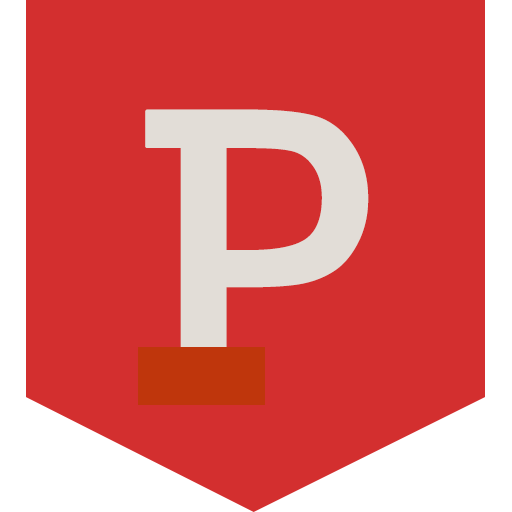
<style>
.page{position:relative;width:512px;height:512px;background:#d32f2f}
.page>*{position:absolute;margin:0}
.t1{font:416.7px "Rockwell";letter-spacing:-0.04em;color:#e2ddd7;font-weight:bold}
</style>
<div class="page">
<p class="t1" style="left:145px;top:109px;width:224px;height:287px">P</p>
</div>
